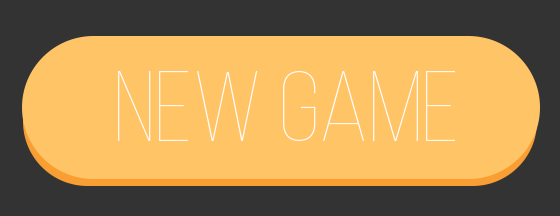
<style>
.page{position:relative;width:560px;height:216px;background:#ffc466}
.page>*{position:absolute;margin:0}
.t1{font:99px "BebasNeue-Thin";color:#ffffff;scale:1.11 1}
</style>
<div class="page">
<p class="t1" style="left:118px;top:71px;width:337px;height:71px">NEW GAME</p>
</div>
